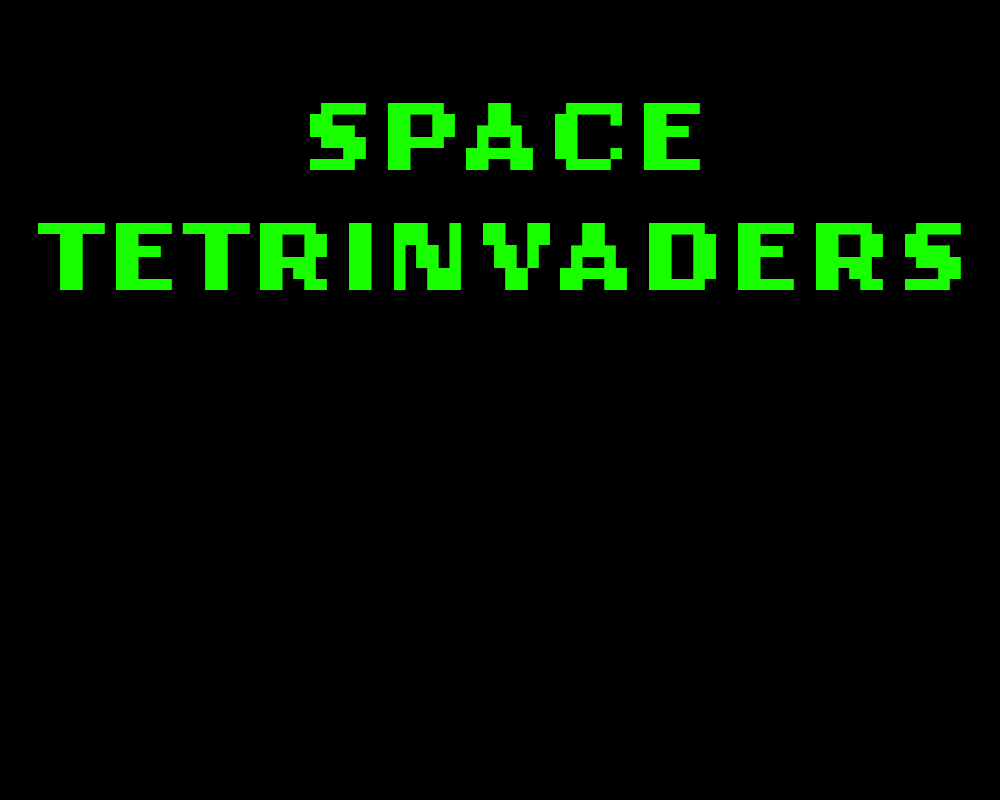
<style>
.page{position:relative;width:1000px;height:800px;background:#000000}
.page>*{position:absolute;margin:0}
.t1{font:100px "LoRes9OT-WideBoldAltOakland";color:#1aff00}
</style>
<div class="page">
<p class="t1" style="left:38px;top:103px;width:923px;height:187px;text-align:center">SPACE<br>TETRINVADERS</p>
</div>
